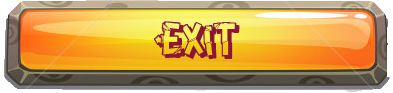
<style>
.page{position:relative;width:393px;height:93px}
.page>*{position:absolute;margin:0}
.t1{font:50px "PeintureFraiche";color:#8b1637}
</style>
<div class="page">
<p class="t1" style="left:154px;top:21px;width:86px;height:38px">Exit</p>
</div>
